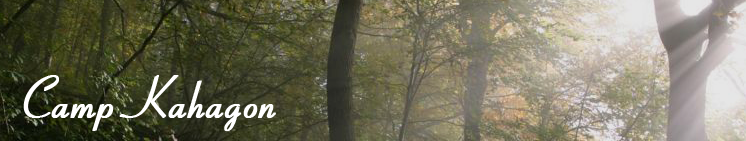
<style>
.page{position:relative;width:746px;height:141px}
.page>*{position:absolute;margin:0}
.t1{font:60px "BowNormal";color:#ffffff;font-weight:bold}
</style>
<div class="page">
<p class="t1" style="left:23px;top:75px;width:253px;height:56px">Camp Kahagon</p>
</div>
